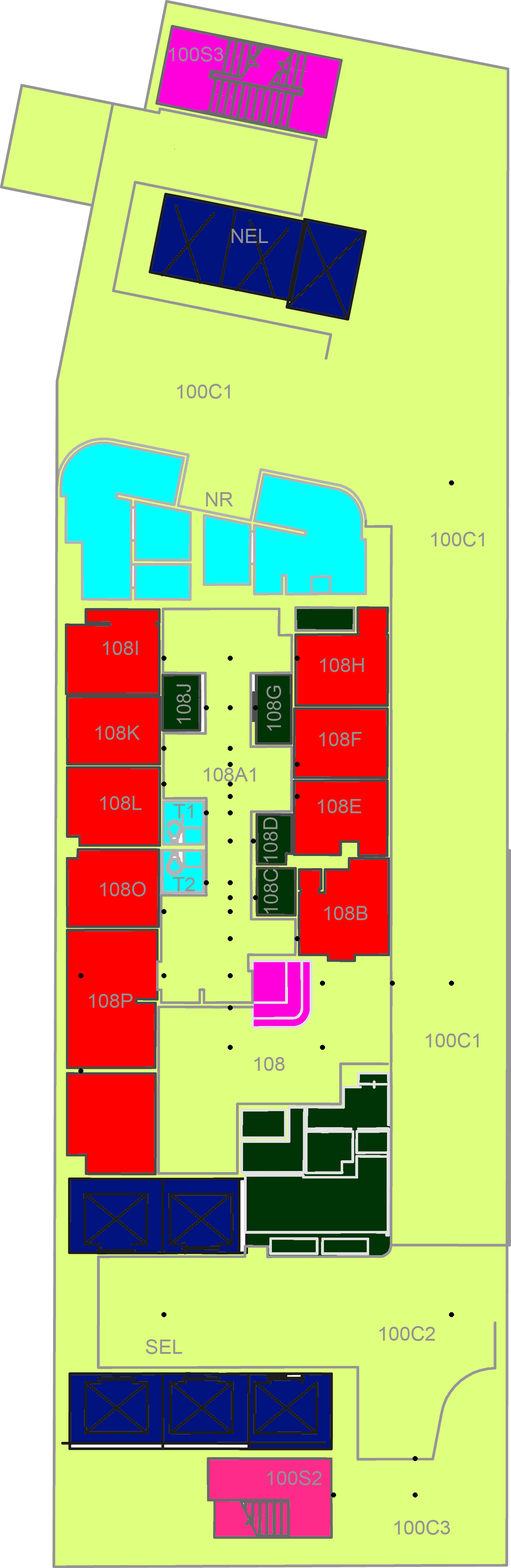
<style>
.page{position:relative;width:511px;height:1568px;background:#dfff7f}
.page>*{position:absolute;margin:0}
.t1{font:19.8px "ArialMT";color:#929292;font-variant:small-caps}
</style>
<div class="page">
<p class="t1" style="left:169px;top:47px;width:54px;height:15px">100S3</p>
<p class="t1" style="left:232px;top:229px;width:36px;height:14px">NEL</p>
<p class="t1" style="left:177px;top:384px;width:53px;height:15px">100C1</p>
<p class="t1" style="left:206px;top:492px;width:27px;height:14px">NR</p>
<p class="t1" style="left:431px;top:532px;width:53px;height:15px">100C1</p>
<p class="t1" style="left:103px;top:641px;width:35px;height:14px">108I</p>
<p class="t1" style="left:320px;top:658px;width:44px;height:14px">108H</p>
<p class="t1" style="left:176px;top:684px;width:15px;height:39px;rotate:-90deg">108J</p>
<p class="t1" style="left:267px;top:686px;width:14px;height:45px;rotate:-90deg">108G</p>
<p class="t1" style="left:96px;top:726px;width:44px;height:14px">108K</p>
<p class="t1" style="left:319px;top:732px;width:43px;height:14px">108F</p>
<p class="t1" style="left:204px;top:767px;width:51px;height:15px">108A1</p>
<p class="t1" style="left:100px;top:796px;width:42px;height:14px">108L</p>
<p class="t1" style="left:174px;top:804px;width:19px;height:14px">T1</p>
<p class="t1" style="left:318px;top:799px;width:43px;height:14px">108E</p>
<p class="t1" style="left:263px;top:817px;width:15px;height:45px;rotate:-90deg">108D</p>
<p class="t1" style="left:263px;top:869px;width:15px;height:44px;rotate:-90deg">108C</p>
<p class="t1" style="left:100px;top:882px;width:46px;height:15px">108O</p>
<p class="t1" style="left:173px;top:877px;width:22px;height:14px">T2</p>
<p class="t1" style="left:324px;top:906px;width:44px;height:14px">108B</p>
<p class="t1" style="left:89px;top:994px;width:44px;height:14px">108P</p>
<p class="t1" style="left:426px;top:1033px;width:53px;height:15px">100C1</p>
<p class="t1" style="left:254px;top:1057px;width:31px;height:14px">108</p>
<p class="t1" style="left:380px;top:1326px;width:55px;height:15px">100C2</p>
<p class="t1" style="left:146px;top:1339px;width:36px;height:15px">SEL</p>
<p class="t1" style="left:267px;top:1470px;width:55px;height:15px">100S2</p>
<p class="t1" style="left:394px;top:1520px;width:56px;height:15px">100C3</p>
</div>
